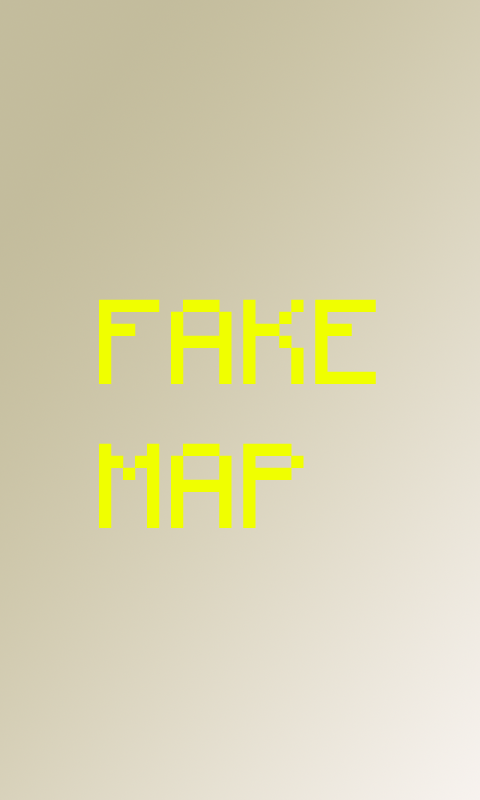
<style>
.page{position:relative;width:480px;height:800px}
.page>*{position:absolute;margin:0}
.t1{font:165px/72px "Minecraftia";color:#f0ff00}
</style>
<div class="page">
<p class="t1" style="left:99px;top:299px;width:277px;height:229px">FAKE<br><br>MAP</p>
</div>
